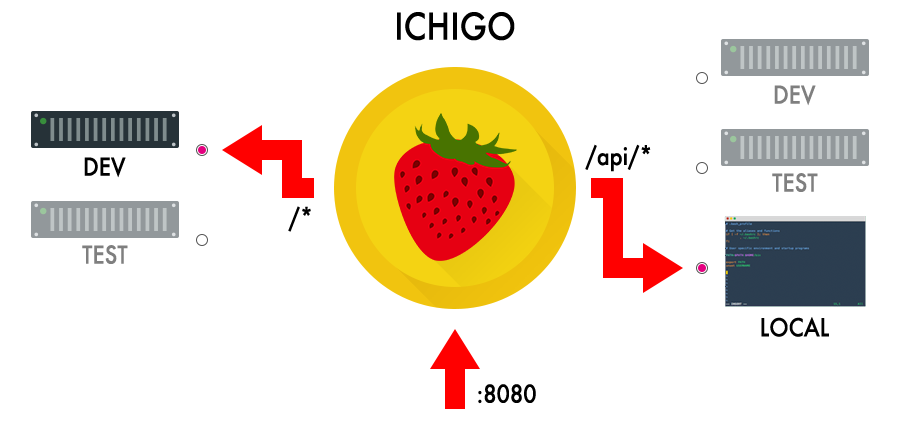
<style>
.page{position:relative;width:900px;height:421px;background:#ffffff}
.page>*{position:absolute;margin:0}
.t1{font:36px "Futura-Medium";color:#000000;scale:0.9 1}
.t2{font:24px "Futura-Medium";color:#7f7f7f;scale:0.9 1}
.t3{font:24px "Futura-Medium";color:#000000;scale:0.9 1}
</style>
<div class="page">
<p class="t1" style="left:397px;top:12px;width:118px;height:29px">ICHIGO</p>
<p class="t2" style="left:774px;top:85px;width:42px;height:21px">DEV</p>
<p class="t3" style="left:585px;top:144px;width:66px;height:28px">/api/*</p>
<p class="t3" style="left:84px;top:157px;width:42px;height:21px">DEV</p>
<p class="t2" style="left:772px;top:173px;width:46px;height:19px">TEST</p>
<p class="t3" style="left:288px;top:206px;width:23px;height:26px">/*</p>
<p class="t2" style="left:82px;top:245px;width:46px;height:19px">TEST</p>
<p class="t3" style="left:761px;top:317px;width:68px;height:20px">LOCAL</p>
<p class="t3" style="left:478px;top:384px;width:58px;height:20px">:8080</p>
</div>
